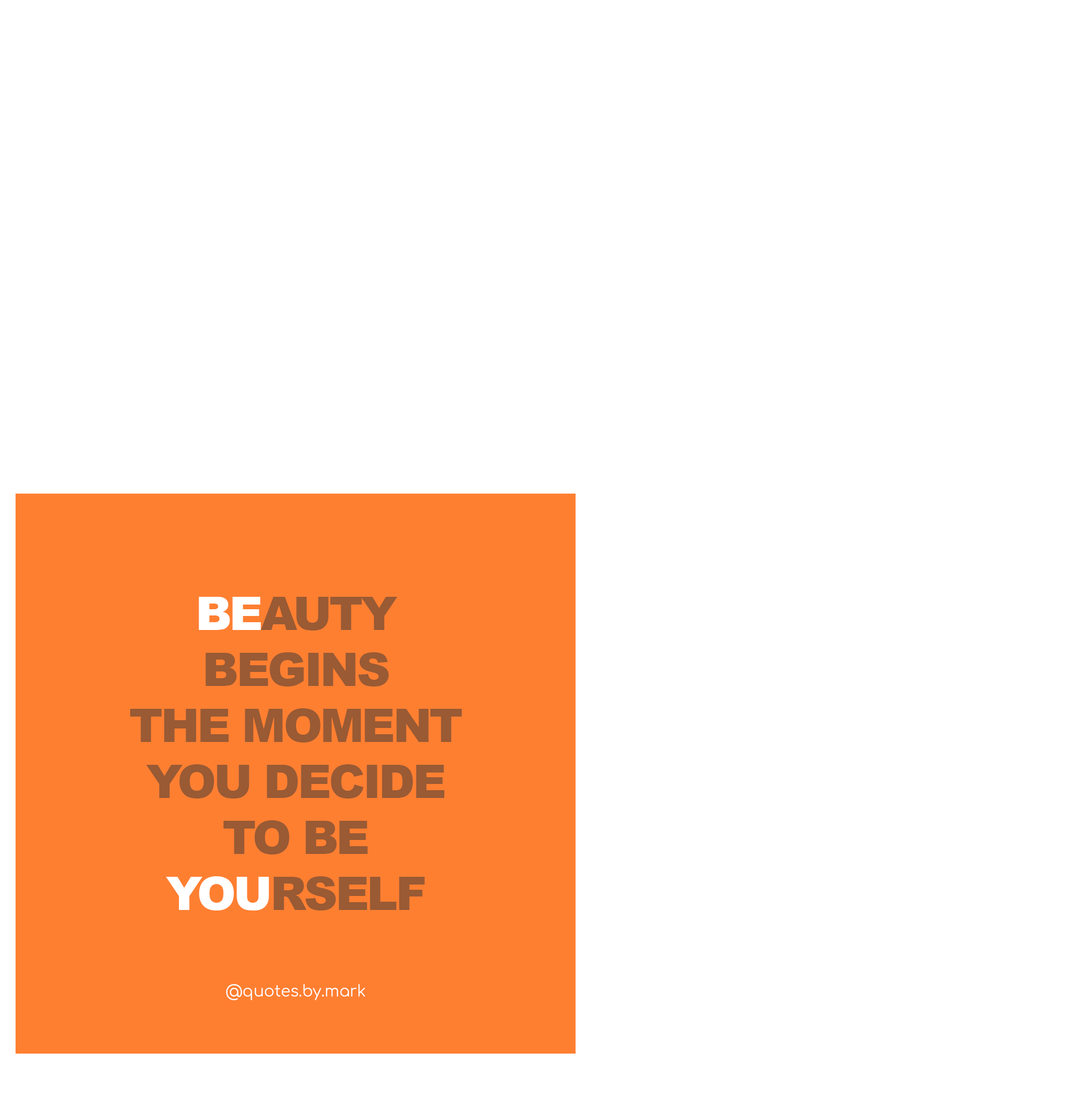
<style>
.page{position:relative;width:1091px;height:1093px;background:#ffffff}
.page>*{position:absolute;margin:0}
.t1{font:46.7px "Arial-Black";letter-spacing:-0.05em;color:#995a34;text-transform:uppercase}
.t2{font:46.7px "Arial-Black";letter-spacing:-0.05em;color:#ffffff;text-transform:uppercase}
.t3{font:15.6px "Comfortaa-Regular";color:#fffefe;font-weight:bold}
</style>
<div class="page">
<p class="t1" style="left:130px;top:597px;width:332px;height:314px;text-align:center"><span class="t2">Be</span>auty<br>begins<br>the moment<br>you decide<br>to be<br><span class="t2">you</span>rself</p>
<p class="t3" style="left:226px;top:984px;width:139px;height:16px">@quotes.by.mark</p>
</div>
